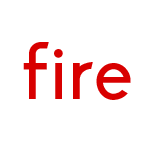
<style>
.page{position:relative;width:150px;height:150px;background:#ffffff}
.page>*{position:absolute;margin:0}
.t1{font:78.1px "Biko";color:#d80000}
</style>
<div class="page">
<p class="t1" style="left:23px;top:42px;width:108px;height:58px">fire</p>
</div>
